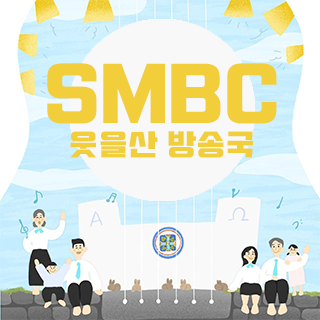
<style>
.page{position:relative;width:320px;height:320px}
.page>*{position:absolute;margin:0}
.t1{font:29.6px "Typo_SsangmunDong_B";color:#f1ce3a}
.t2{font:74.1px "Typo_SsangmunDong_B";color:#f1ce3a}
</style>
<div class="page">
<p class="t1" style="left:47px;top:63px;width:230px;height:95px;text-align:center"><span class="t2">SMBC<br></span>웃을산 방송국</p>
</div>
